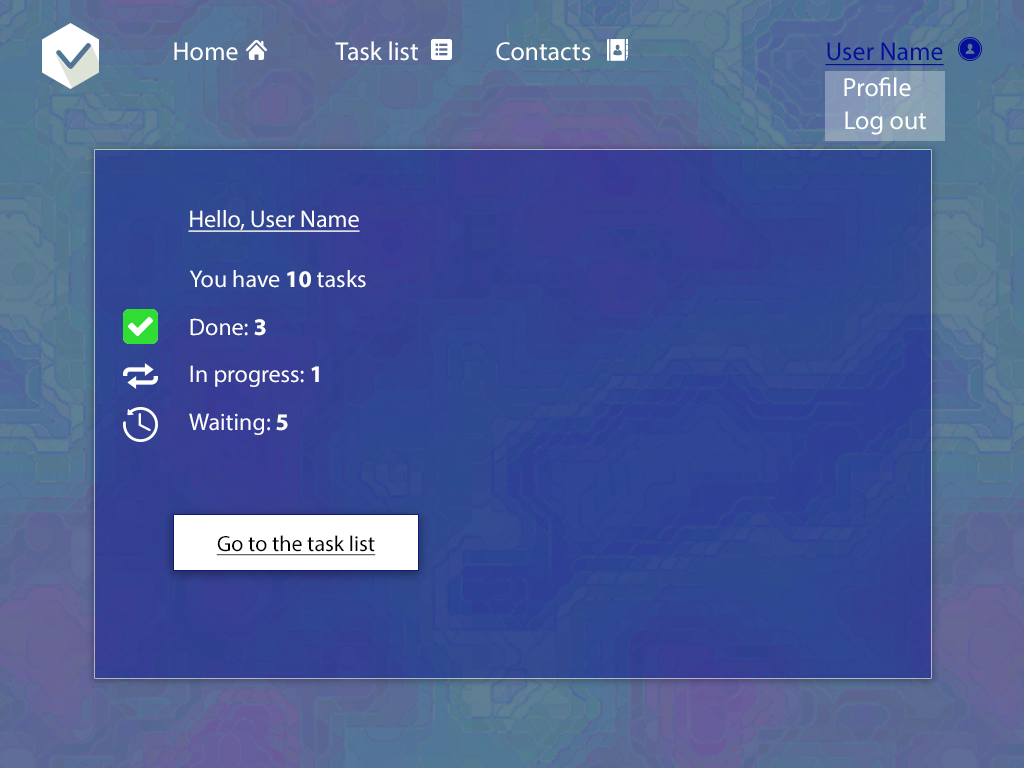
<style>
.page{position:relative;width:1024px;height:768px}
.page>*{position:absolute;margin:0}
.t1{font:26px "MyriadPro-Regular";color:#ffffff}
.t2{font:26px "MyriadPro-Regular";color:#060e9a;text-decoration:underline}
.t3{font:24px "MyriadPro-Regular";color:#ffffff;text-decoration:underline}
.t4{font:24px "MyriadPro-Regular";color:#ffffff}
.t5{font:24px "MyriadPro-Bold";color:#ffffff}
.t6{font:22px "MyriadPro-Regular";color:#020202;text-decoration:underline}
</style>
<div class="page">
<p class="t1" style="left:335px;top:41px;width:83px;height:20px">Task list</p>
<p class="t1" style="left:174px;top:42px;width:64px;height:19px">Home</p>
<p class="t1" style="left:496px;top:42px;width:95px;height:19px">Contacts</p>
<p class="t2" style="left:825px;top:42px;width:119px;height:24px">User Name</p>
<p class="t1" style="left:844px;top:77px;width:67px;height:20px">Profile</p>
<p class="t1" style="left:845px;top:111px;width:81px;height:24px">Log out</p>
<p class="t3" style="left:188px;top:210px;width:172px;height:22px">Hello, User Name</p>
<p class="t4" style="left:190px;top:270px;width:176px;height:18px">You have <span class="t5">10 </span>tasks</p>
<p class="t4" style="left:190px;top:318px;width:76px;height:18px">Done:<span class="t5"> 3</span></p>
<p class="t4" style="left:190px;top:365px;width:129px;height:22px">In progress: <span class="t5">1</span></p>
<p class="t4" style="left:189px;top:413px;width:99px;height:22px">Waiting:<span class="t5"> 5</span></p>
<p class="t6" style="left:216px;top:535px;width:160px;height:21px">Go to the task list</p>
</div>
